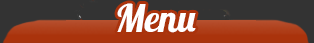
<style>
.page{position:relative;width:314px;height:43px;background:#333333}
.page>*{position:absolute;margin:0}
.t1{font:38px "UVFLobster12";color:#ffffff}
</style>
<div class="page">
<p class="t1" style="left:117px;top:3px;width:79px;height:30px">Menu</p>
</div>
